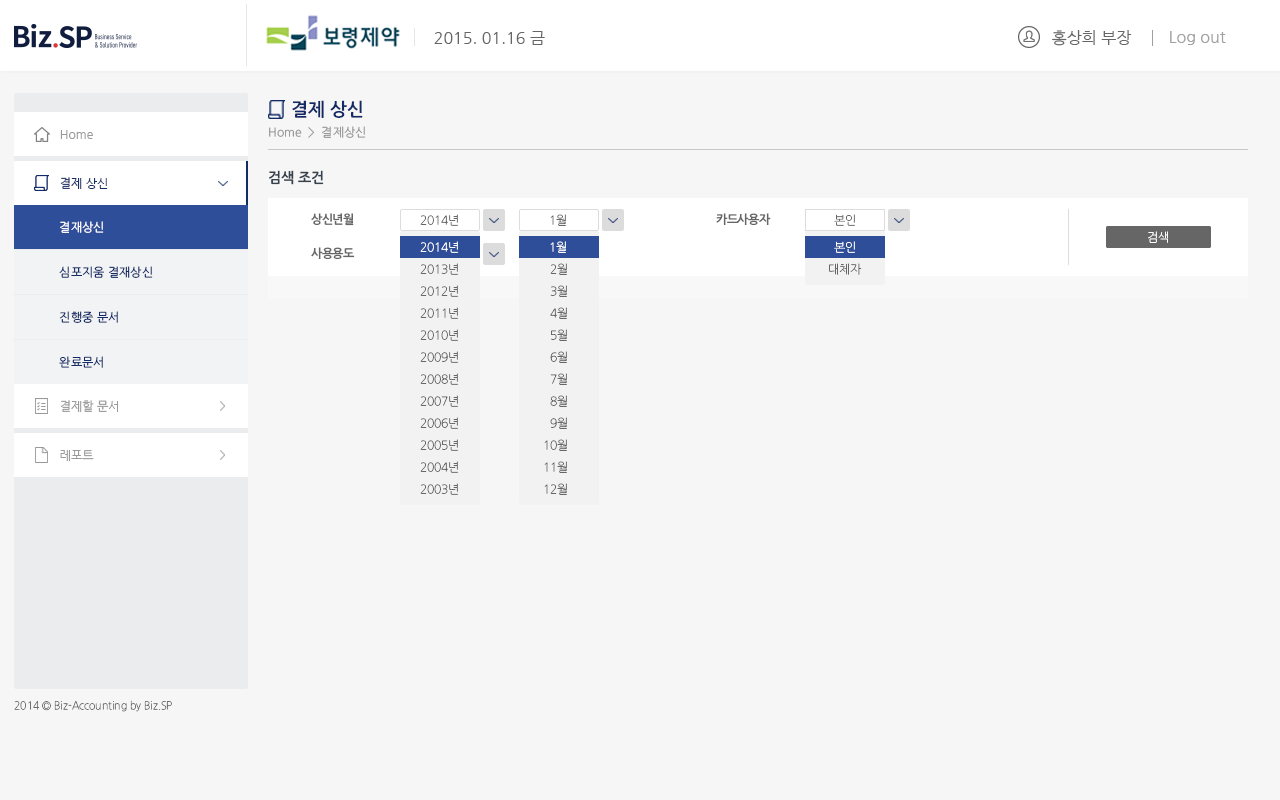
<style>
.page{position:relative;width:1280px;height:800px;background:#f6f6f6}
.page>*{position:absolute;margin:0}
.t1{font:16px "NanumGothic";color:#666666}
.t2{font:16px "NanumGothic";color:#a0a0a0}
.t3{font:18px "NanumGothicOTFBold";color:#122b66}
.t4{font:12px "NanumGothicOTF";color:#999999}
.t5{font:12px "NanumGothic";color:#999999}
.t6{font:14px "NanumGothicOTFBold";color:#38424e}
.t7{font:12px "NanumGothic";color:#122b66}
.t8{font:12px "NanumGothicOTF";color:#ffffff}
.t9{font:12px "NanumGothicOTFBold";letter-spacing:-0.025em;color:#666666}
.t10{font:12px "NanumGothicOTFLight";letter-spacing:-0.025em;color:#666666}
.t11{font:12px "NanumGothicOTFLight";letter-spacing:-0.025em;color:#ffffff}
.t12{font:12px "NanumGothicOTFLight";letter-spacing:-0.025em;color:#fffefe}
.t13{font:12px "NanumGothicOTF";color:#122b66}
.t14{font:11px "NanumGothicOTFLight";color:#6c6d6d;scale:0.94 1}
</style>
<div class="page">
<p class="t1" style="left:1052px;top:30px;width:80px;height:16px">홍상희 부장</p>
<p class="t1" style="left:434px;top:31px;width:111px;height:14px">2015. 01.16 금</p>
<p class="t2" style="left:1170px;top:31px;width:56px;height:14px">Log out</p>
<p class="t3" style="left:292px;top:100px;width:71px;height:18px">결제 상신</p>
<p class="t4" style="left:269px;top:126px;width:97px;height:12px">Home  &gt;  결제상신</p>
<p class="t5" style="left:60px;top:130px;width:33px;height:9px">Home</p>
<p class="t6" style="left:269px;top:170px;width:55px;height:15px">검색 조건</p>
<p class="t7" style="left:60px;top:177px;width:48px;height:12px">결제 상신</p>
<p class="t8" style="left:60px;top:221px;width:44px;height:12px">결재상신</p>
<p class="t9" style="left:311px;top:213px;width:43px;height:13px">상신년월</p>
<p class="t10" style="left:420px;top:214px;width:39px;height:12px">2014년</p>
<p class="t10" style="left:550px;top:214px;width:16px;height:12px">1월</p>
<p class="t9" style="left:716px;top:213px;width:55px;height:12px">카드사용자</p>
<p class="t10" style="left:834px;top:214px;width:21px;height:12px">본인</p>
<p class="t11" style="left:1148px;top:231px;width:20px;height:12px">검색</p>
<p class="t11" style="left:1148px;top:231px;width:20px;height:12px">검색</p>
<p class="t11" style="left:420px;top:241px;width:39px;height:12px">2014년</p>
<p class="t11" style="left:550px;top:241px;width:16px;height:12px">1월</p>
<p class="t12" style="left:834px;top:241px;width:21px;height:12px">본인</p>
<p class="t9" style="left:311px;top:247px;width:44px;height:12px">사용용도</p>
<p class="t13" style="left:59px;top:266px;width:94px;height:12px">심포지움 결재상신</p>
<p class="t10" style="left:420px;top:263px;width:39px;height:12px">2013년</p>
<p class="t10" style="left:550px;top:263px;width:17px;height:12px">2월</p>
<p class="t10" style="left:829px;top:263px;width:33px;height:12px">대체자</p>
<p class="t10" style="left:420px;top:285px;width:39px;height:12px">2012년</p>
<p class="t10" style="left:550px;top:285px;width:17px;height:12px">3월</p>
<p class="t13" style="left:59px;top:311px;width:59px;height:12px">진행중 문서</p>
<p class="t10" style="left:420px;top:307px;width:39px;height:12px">2011년</p>
<p class="t10" style="left:550px;top:307px;width:17px;height:12px">4월</p>
<p class="t10" style="left:420px;top:329px;width:39px;height:12px">2010년</p>
<p class="t10" style="left:551px;top:329px;width:16px;height:12px">5월</p>
<p class="t10" style="left:420px;top:351px;width:39px;height:12px">2009년</p>
<p class="t10" style="left:550px;top:351px;width:17px;height:12px">6월</p>
<p class="t13" style="left:59px;top:356px;width:44px;height:12px">완료문서</p>
<p class="t10" style="left:420px;top:373px;width:39px;height:12px">2008년</p>
<p class="t10" style="left:550px;top:373px;width:17px;height:12px">7월</p>
<p class="t5" style="left:60px;top:400px;width:58px;height:12px">결제할 문서</p>
<p class="t5" style="left:60px;top:400px;width:58px;height:12px">결제할 문서</p>
<p class="t10" style="left:420px;top:395px;width:39px;height:12px">2007년</p>
<p class="t10" style="left:550px;top:395px;width:17px;height:12px">8월</p>
<p class="t10" style="left:420px;top:417px;width:39px;height:12px">2006년</p>
<p class="t10" style="left:550px;top:417px;width:17px;height:12px">9월</p>
<p class="t10" style="left:420px;top:439px;width:39px;height:12px">2005년</p>
<p class="t10" style="left:544px;top:439px;width:23px;height:12px">10월</p>
<p class="t5" style="left:60px;top:450px;width:34px;height:11px">레포트</p>
<p class="t10" style="left:420px;top:461px;width:39px;height:12px">2004년</p>
<p class="t10" style="left:544px;top:461px;width:23px;height:12px">11월</p>
<p class="t10" style="left:420px;top:483px;width:39px;height:12px">2003년</p>
<p class="t10" style="left:544px;top:483px;width:23px;height:12px">12월</p>
<p class="t14" style="left:14px;top:700px;width:158px;height:12px">2014 © Biz-Accounting by Biz.SP</p>
</div>
